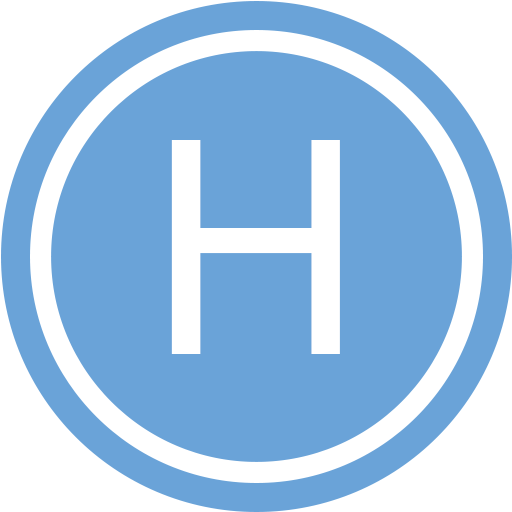
<style>
.page{position:relative;width:512px;height:512px;background:#6aa3d8}
.page>*{position:absolute;margin:0}
.t1{font:299.4px "ArialMT";color:#ffffff}
</style>
<div class="page">
<p class="t1" style="left:171px;top:140px;width:169px;height:214px">H</p>
</div>
